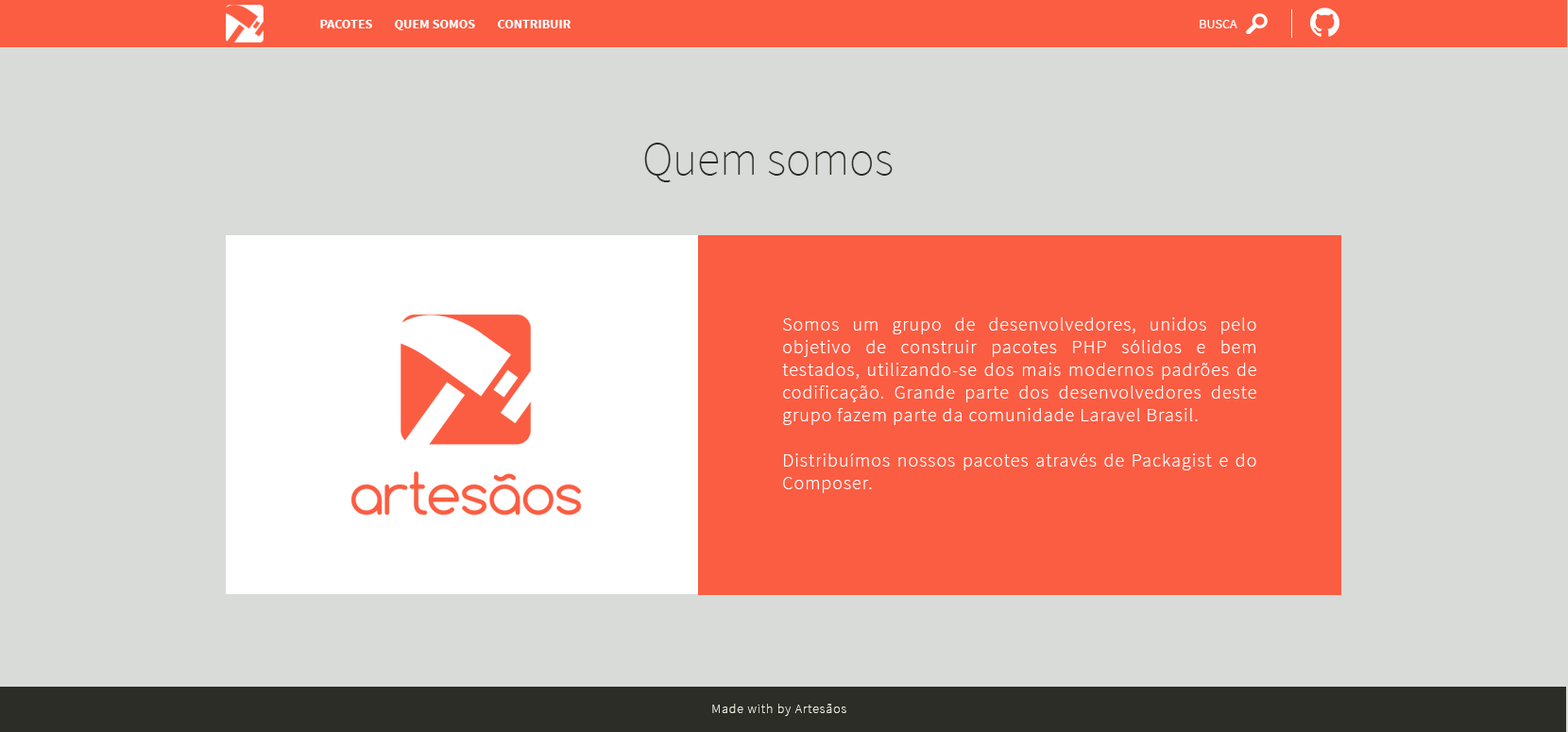
<style>
.page{position:relative;width:1568px;height:732px;background:#d9dbd8}
.page>*{position:absolute;margin:0}
.t1{font:13.2px "SourceSansPro-Bold";color:#ffffff}
.t2{font:13.2px "SourceSansPro-Regular";color:#ffffff}
.t3{font:47.2px "SourceSansPro-ExtraLight";color:#2b2d26}
.t4{font:18.9px/22.7px "SourceSansPro-Light";letter-spacing:0.05em;color:#ffffff}
.t5{font:13.2px "SourceSansPro-ExtraLight";letter-spacing:0.065em;color:#eceddf}
</style>
<div class="page">
<p class="t1" style="left:320px;top:20px;width:52px;height:8px">PACOTES</p>
<p class="t1" style="left:395px;top:20px;width:80px;height:10px">QUEM SOMOS</p>
<p class="t1" style="left:498px;top:20px;width:73px;height:8px">CONTRIBUIR</p>
<p class="t2" style="left:1200px;top:20px;width:37px;height:8px">BUSCA</p>
<p class="t3" style="left:644px;top:143px;width:249px;height:39px">Quem somos</p>
<p class="t4" style="left:782px;top:317px;width:474px;height:176px;text-align:justify">Somos um grupo de desenvolvedores, unidos pelo objetivo de construir pacotes PHP sólidos e bem testados, utilizando-se dos mais modernos padrões de codificação. Grande parte dos desenvolvedores deste grupo fazem parte da comunidade Laravel Brasil.<br><br>Distribuímos nossos pacotes através de Packagist e do Composer.</p>
<p class="t5" style="left:712px;top:704px;width:134px;height:12px">Made with by Artesãos</p>
</div>
